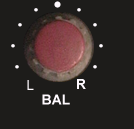
<style>
.page{position:relative;width:134px;height:129px;background:#1d1c1a}
.page>*{position:absolute;margin:0}
.t1{font:14px "ArialMT";color:#fffaff}
.t2{font:14px "Arial-BoldMT";color:#fffaff}
</style>
<div class="page">
<p class="t1" style="left:27px;top:80px;width:7px;height:10px">L</p>
<p class="t2" style="left:77px;top:79px;width:9px;height:10px">R</p>
<p class="t2" style="left:42px;top:94px;width:28px;height:11px">BAL</p>
</div>
